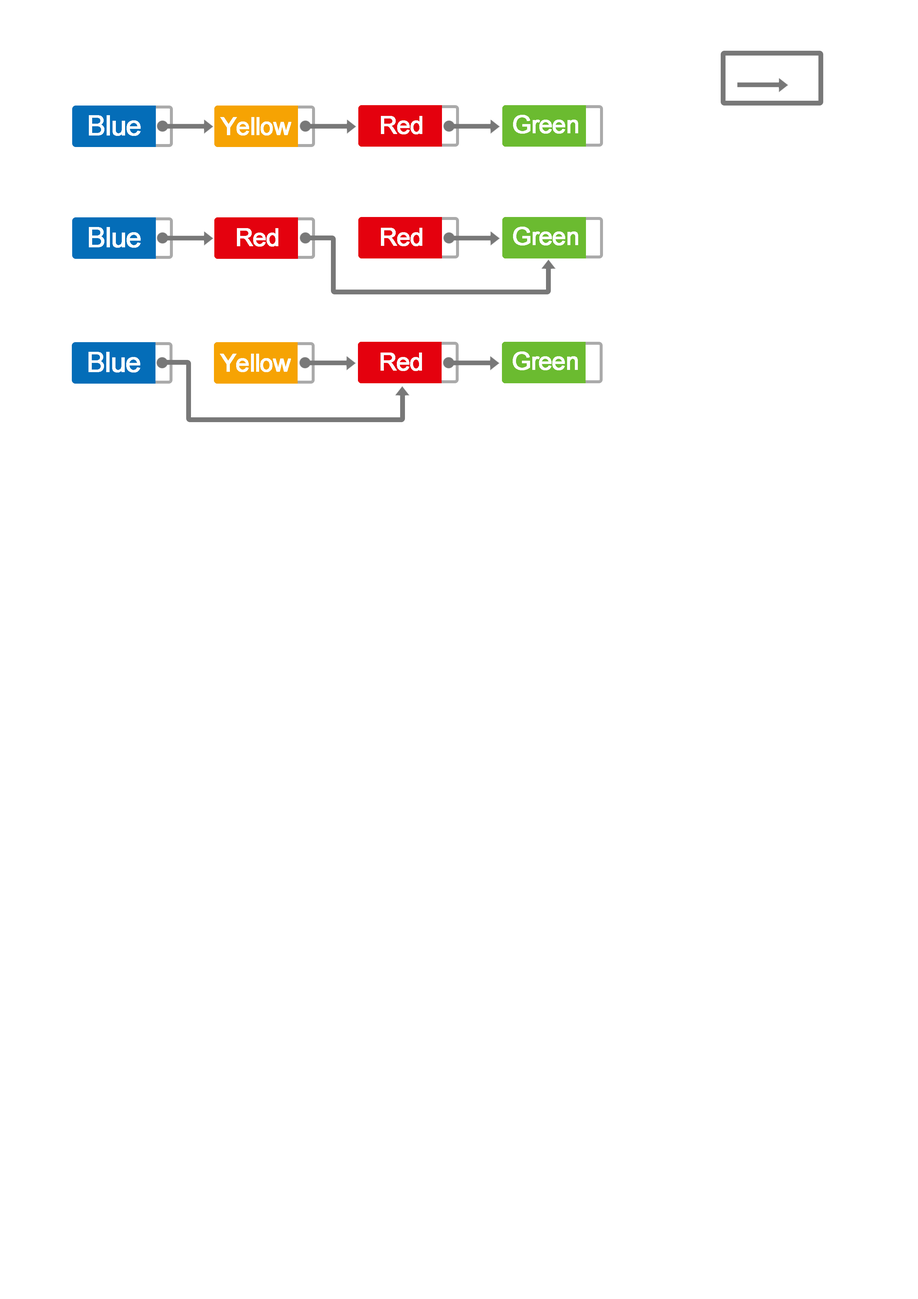
<style>
.page{position:relative;width:918px;height:1299px;background:#ffffff}
.page>*{position:absolute;margin:0}
.t1{font:27.8px "ArialMT";letter-spacing:-0.04em;color:#fcfdfd;font-weight:bold}
.t2{font:24.7px "ArialMT";letter-spacing:-0.04em;color:#fcfdfd;font-weight:bold}
</style>
<div class="page">
<p class="t1" style="left:89px;top:115px;width:52px;height:21px">Blue</p>
<p class="t2" style="left:220px;top:117px;width:71px;height:19px">Yellow</p>
<p class="t2" style="left:381px;top:116px;width:41px;height:18px">Red</p>
<p class="t2" style="left:513px;top:115px;width:65px;height:19px">Green</p>
<p class="t1" style="left:89px;top:227px;width:52px;height:21px">Blue</p>
<p class="t2" style="left:237px;top:228px;width:41px;height:19px">Red</p>
<p class="t2" style="left:381px;top:228px;width:41px;height:18px">Red</p>
<p class="t2" style="left:513px;top:227px;width:65px;height:18px">Green</p>
<p class="t1" style="left:88px;top:352px;width:52px;height:20px">Blue</p>
<p class="t2" style="left:220px;top:354px;width:71px;height:18px">Yellow</p>
<p class="t2" style="left:381px;top:352px;width:41px;height:19px">Red</p>
<p class="t2" style="left:513px;top:351px;width:65px;height:19px">Green</p>
</div>
